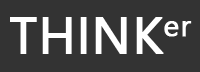
<style>
.page{position:relative;width:200px;height:72px;background:#333333}
.page>*{position:absolute;margin:0}
.t1{font:52px "SegoeUI";color:#ffffff;font-weight:bold}
</style>
<div class="page">
<p class="t1" style="left:10px;top:17px;width:182px;height:37px">THINKer</p>
</div>
